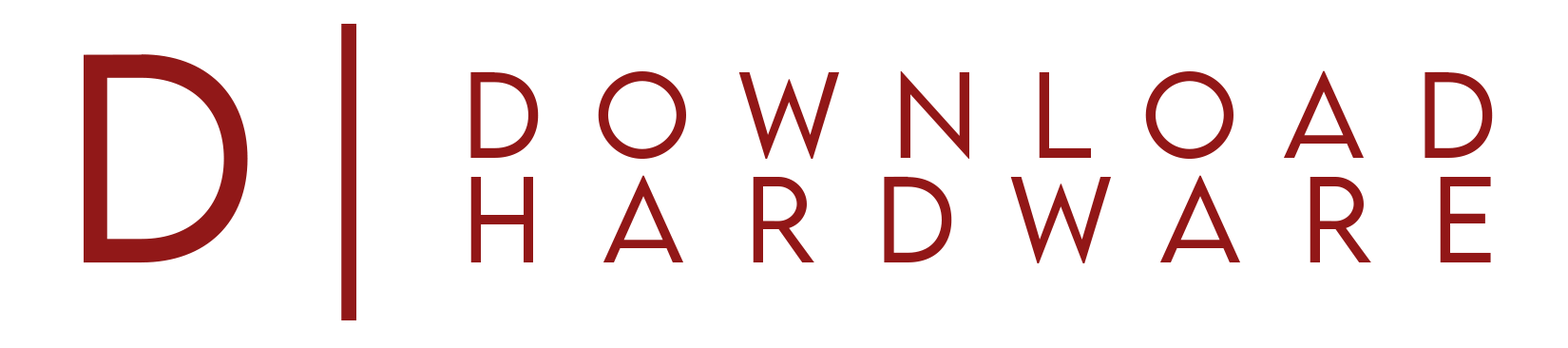
<style>
.page{position:relative;width:1568px;height:348px;background:#ffffff}
.page>*{position:absolute;margin:0}
.t1{font:264px "LEMONMILK-Light";letter-spacing:0.18em;color:#911818}
.t2{font:108.3px/104.5px "LEMONMILK-Light";letter-spacing:0.48em;color:#921717}
.t3{font:108.3px/104.5px "LEMONMILK-Light";letter-spacing:0.55em;color:#921717}
</style>
<div class="page">
<p class="t1" style="left:84px;top:24px;width:272px;height:296px">D|</p>
<p class="t2" style="left:470px;top:70px;width:1023px;height:193px;text-align:center">DOWNLOAD<br><span class="t3">HARDWARE</span></p>
</div>
